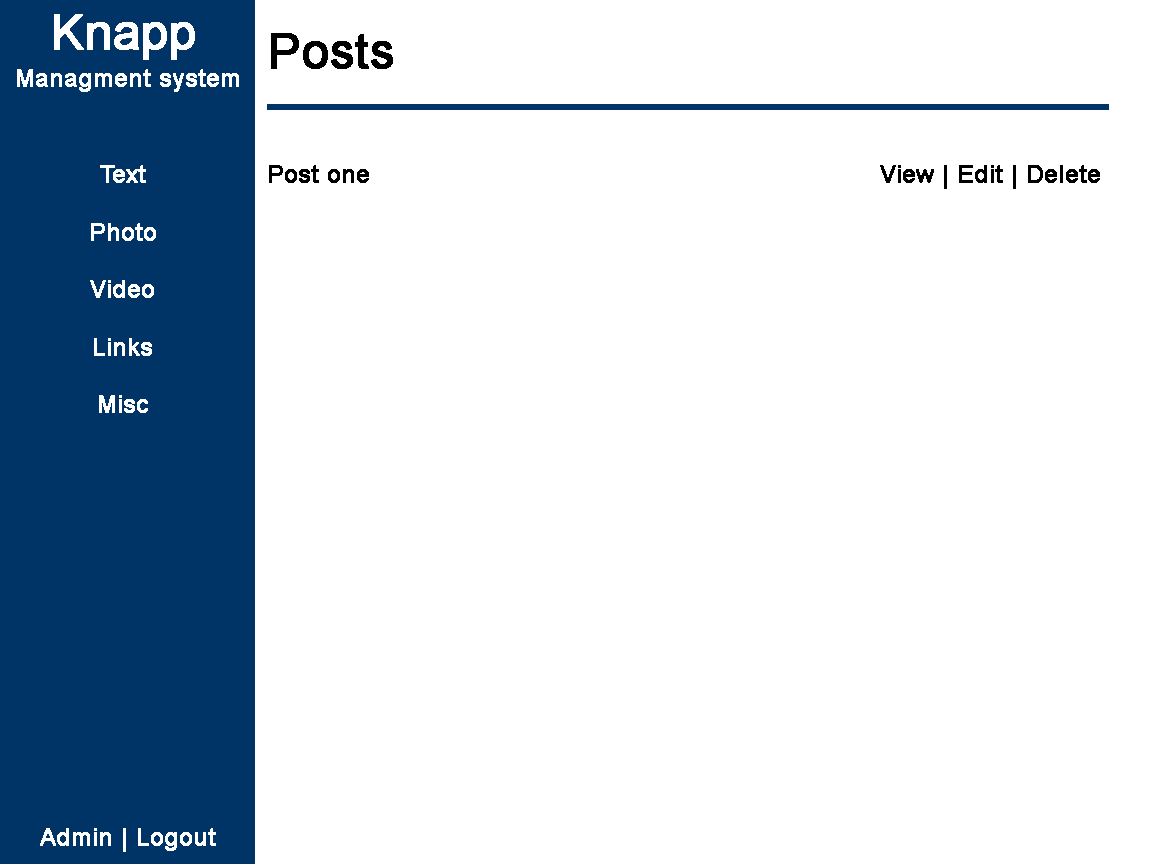
<style>
.page{position:relative;width:1152px;height:864px;background:#ffffff}
.page>*{position:absolute;margin:0}
.t1{font:48px "ArialMT";color:#ffffff;font-weight:bold}
.t2{font:48px "ArialMT";color:#000000;font-weight:bold}
.t3{font:24px "ArialMT";color:#ffffff;font-weight:bold}
.t4{font:24px "ArialMT";color:#000000;font-weight:bold}
</style>
<div class="page">
<p class="t1" style="left:54px;top:14px;width:141px;height:46px">Knapp</p>
<p class="t2" style="left:271px;top:33px;width:122px;height:36px">Posts</p>
<p class="t3" style="left:17px;top:69px;width:222px;height:23px">Managment system</p>
<p class="t3" style="left:90px;top:165px;width:66px;height:248px;text-align:center">Text<br><br>Photo<br><br>Video<br><br>Links<br><br>Misc</p>
<p class="t4" style="left:269px;top:165px;width:100px;height:18px">Post one</p>
<p class="t4" style="left:880px;top:165px;width:220px;height:24px">View | Edit | Delete</p>
<p class="t3" style="left:40px;top:828px;width:176px;height:24px">Admin | Logout</p>
</div>
